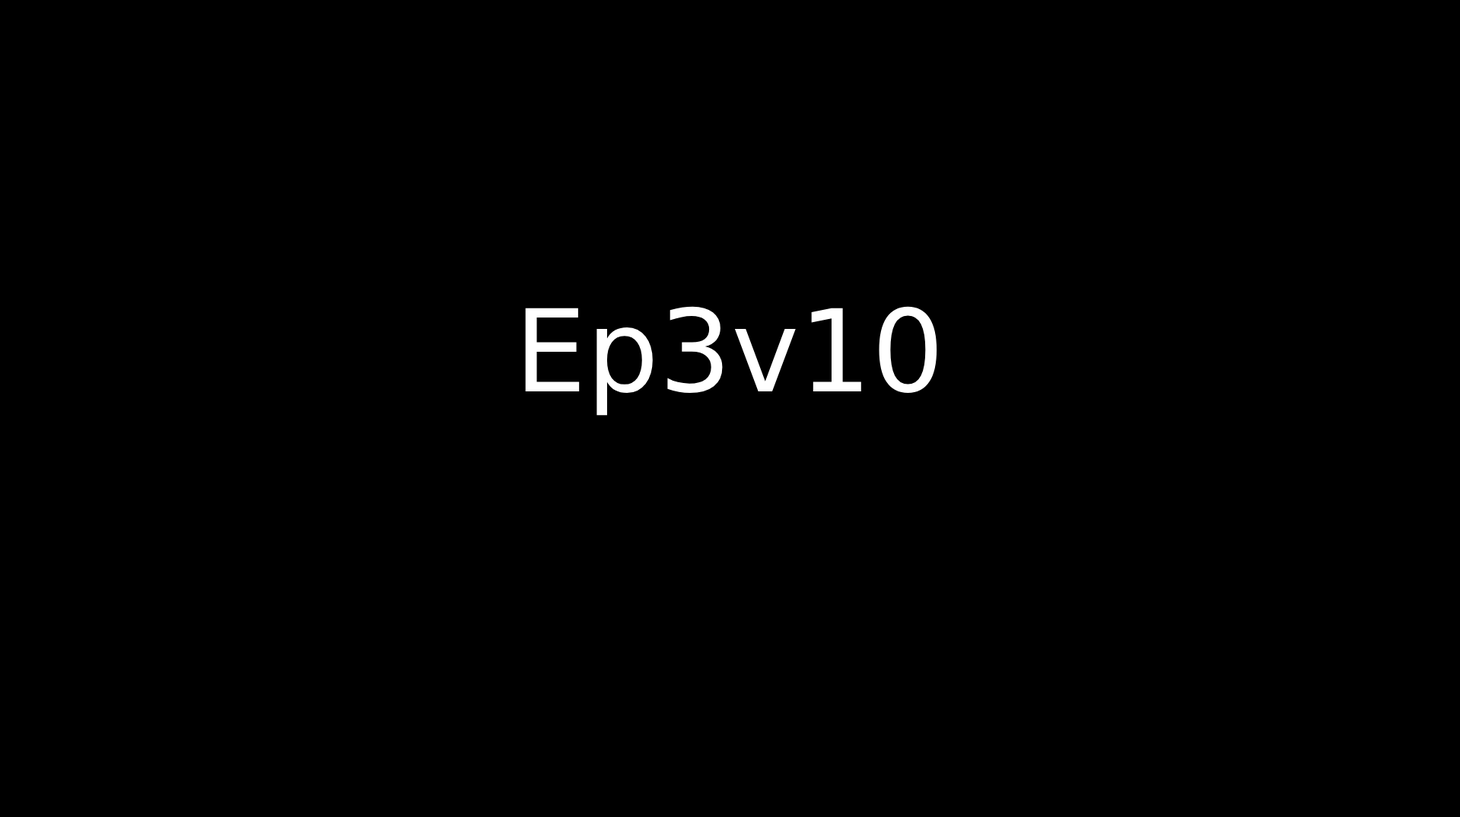
<style>
.page{position:relative;width:1460px;height:817px;background:#000000}
.page>*{position:absolute;margin:0}
.t1{font:114.1px "DejaVuSans";color:#ffffff}
</style>
<div class="page">
<p class="t1" style="left:525px;top:306px;width:413px;height:110px">Ep3v10</p>
</div>
